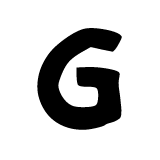
<style>
.page{position:relative;width:160px;height:160px;background:#ffffff}
.page>*{position:absolute;margin:0}
.t1{font:159.4px "QAReports";color:#000000}
</style>
<div class="page">
<p class="t1" style="left:37px;top:28px;width:85px;height:102px">G</p>
</div>
